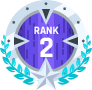
<style>
.page{position:relative;width:92px;height:90px;background:#ffffff}
.page>*{position:absolute;margin:0}
.t1{font:11px "Rajdhani-Bold";color:#ffffff}
.t2{font:30px "Rajdhani-Bold";color:#ffffff}
</style>
<div class="page">
<p class="t1" style="left:34px;top:26px;width:25px;height:8px">RANK</p>
<p class="t2" style="left:40px;top:37px;width:13px;height:20px">2</p>
</div>
